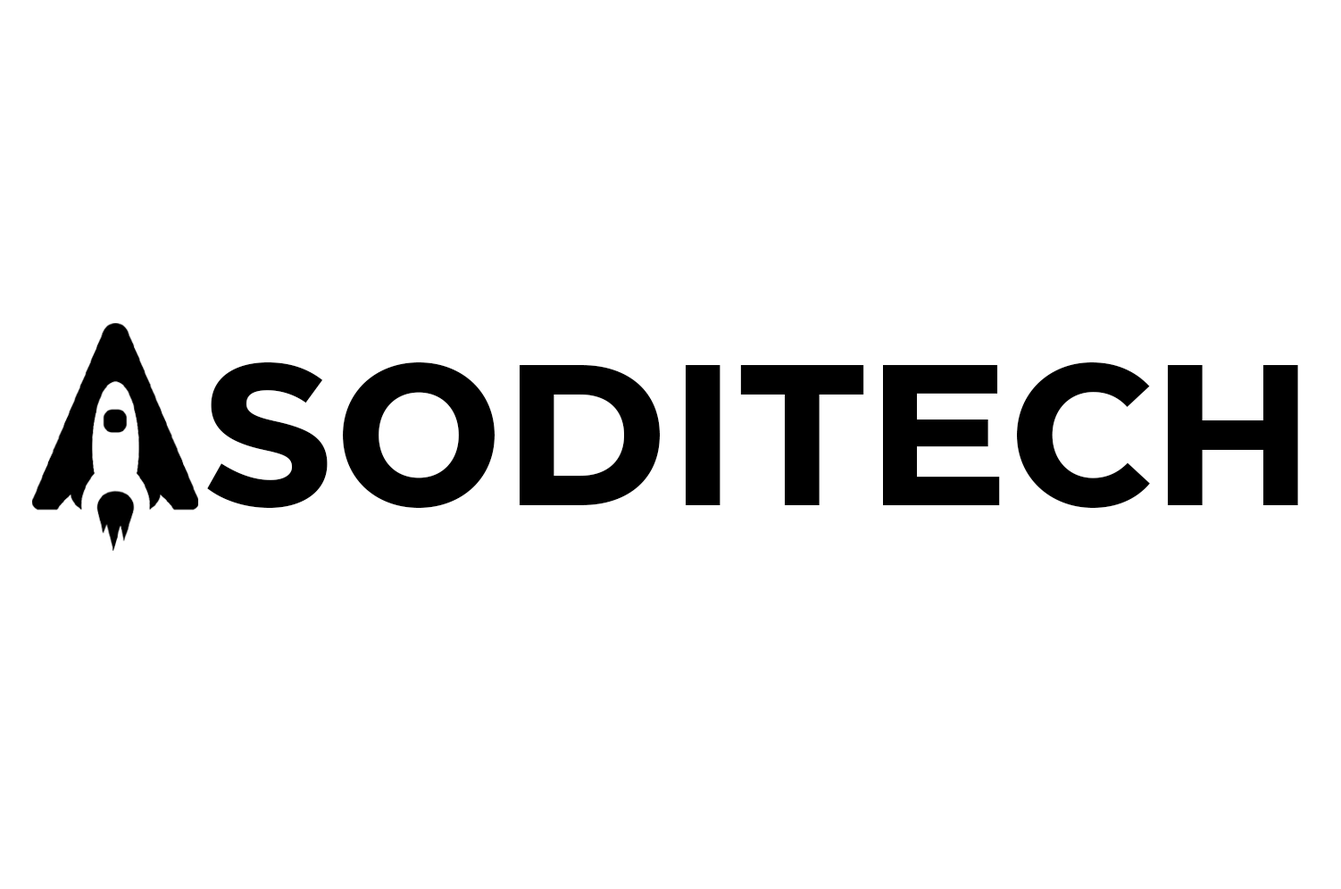
<style>
.page{position:relative;width:1341px;height:889px;background:#ffffff}
.page>*{position:absolute;margin:0}
.t1{font:200.5px "EastmanTrial-Bold";color:#000000}
</style>
<div class="page">
<p class="t1" style="left:207px;top:362px;width:1091px;height:147px">SODITECH</p>
</div>
